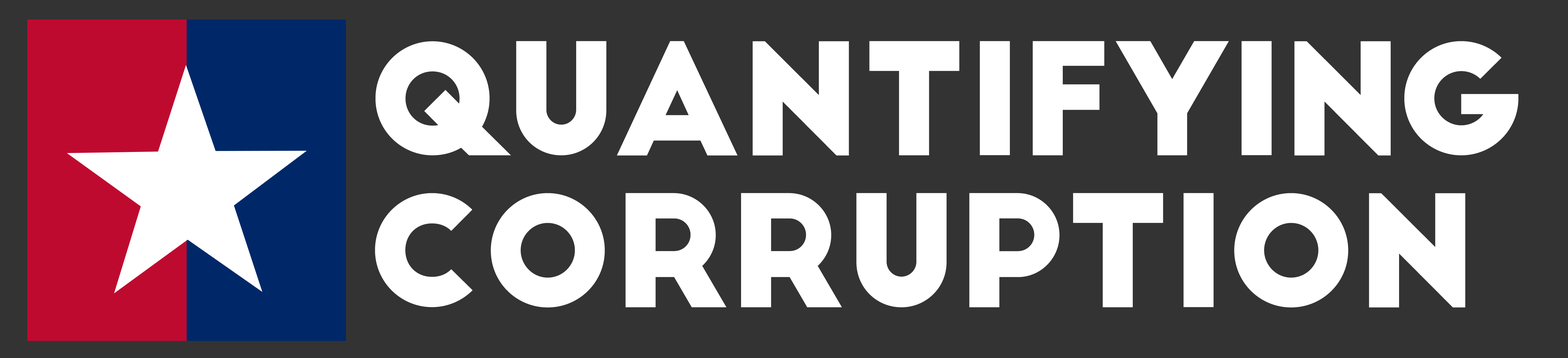
<style>
.page{position:relative;width:1568px;height:358px;background:#333333}
.page>*{position:absolute;margin:0}
.t1{font:152.1px/152.1px "BigJohn";color:#ffffff}
</style>
<div class="page">
<p class="t1" style="left:375px;top:41px;width:1144px;height:267px">Quantifying<br>Corruption</p>
</div>
